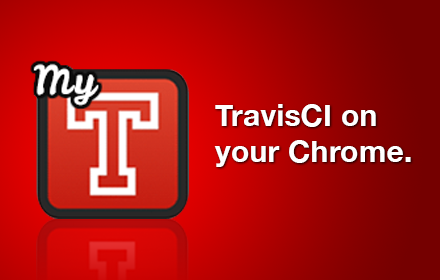
<style>
.page{position:relative;width:440px;height:280px}
.page>*{position:absolute;margin:0}
.t1{font:30px "HelveticaNeue-Bold";letter-spacing:0.01em;color:#ffffff}
</style>
<div class="page">
<p class="t1" style="left:214px;top:104px;width:197px;height:63px">TravisCI on<br>your Chrome.</p>
</div>
